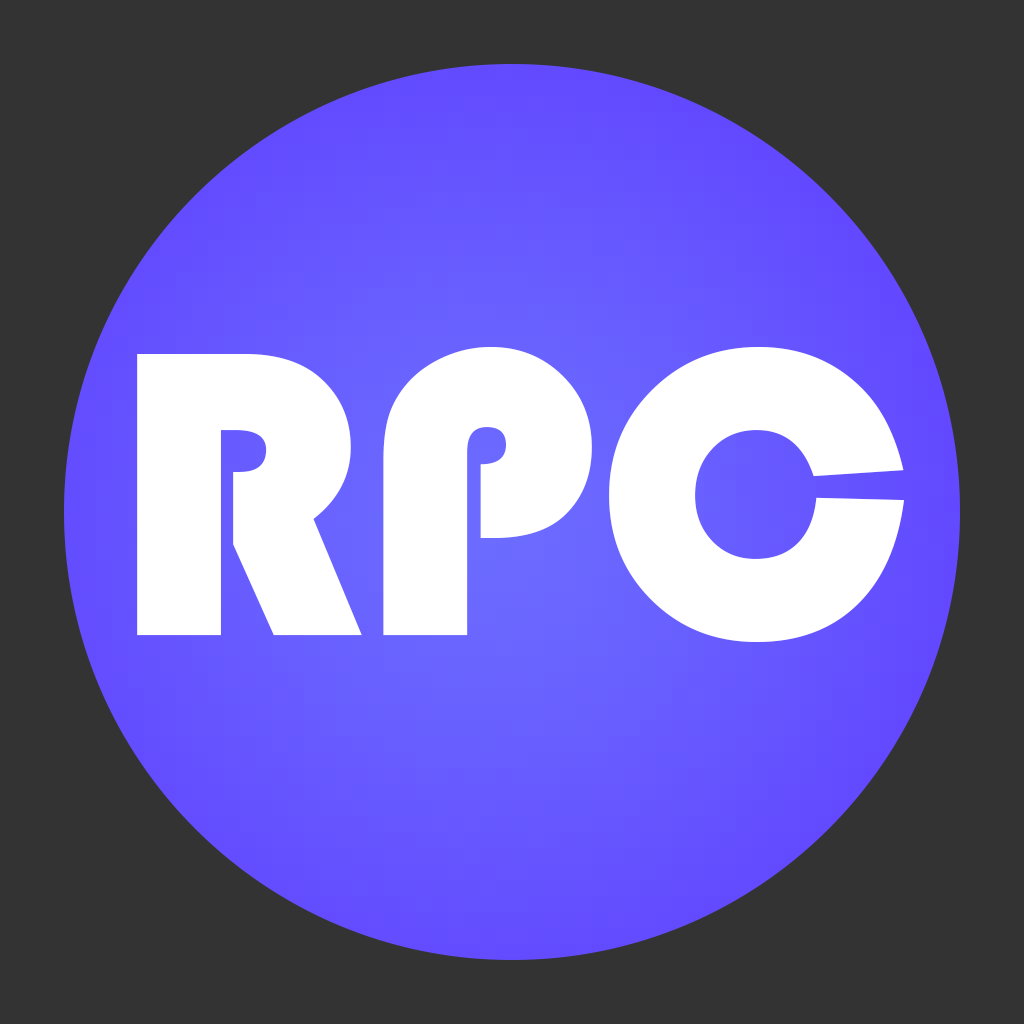
<style>
.page{position:relative;width:1024px;height:1024px;background:#333333}
.page>*{position:absolute;margin:0}
.t1{font:421.9px "Bauhaus93";color:#ffffff}
</style>
<div class="page">
<p class="t1" style="left:137px;top:347px;width:767px;height:295px">RPC</p>
</div>
